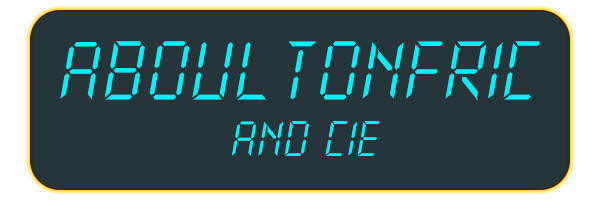
<style>
.page{position:relative;width:600px;height:200px;background:#26353a}
.page>*{position:absolute;margin:0}
.t1{font:50px "NewXDigitaltfbLight";color:#00f0ff}
.t2{font:30px "NewXDigitaltfbLight";color:#00f0ff}
</style>
<div class="page">
<p class="t1" style="left:60px;top:41px;width:480px;height:116px">Aboultonfric<br><br><span class="t2">      AND cie</span></p>
</div>
